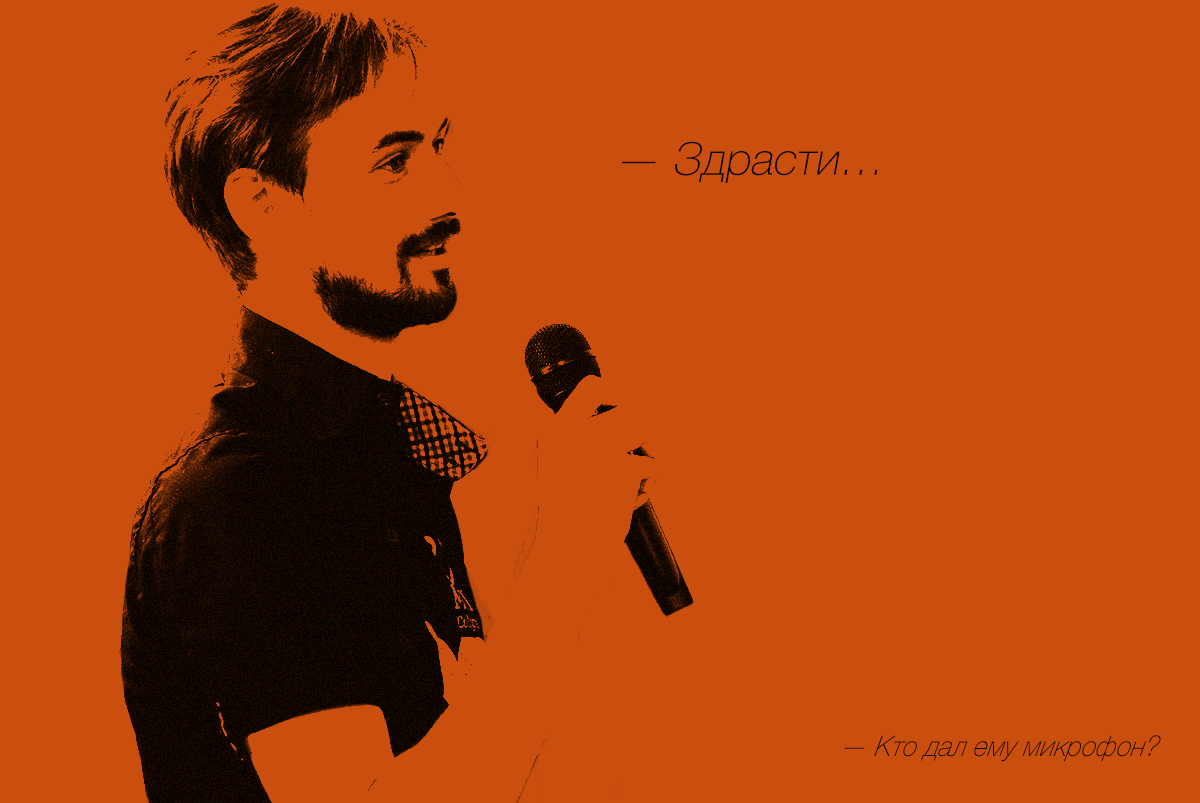
<style>
.page{position:relative;width:1200px;height:803px;background:#ca4e0e}
.page>*{position:absolute;margin:0}
.t1{font:45.2px "HelveticaNeue-Thin";color:#000000;font-style:italic}
.t2{font:28.1px "HelveticaNeue-ThinItalic";color:#000000;font-style:italic;scale:0.95 1}
</style>
<div class="page">
<p class="t1" style="left:622px;top:141px;width:256px;height:42px">— Здрасти…</p>
<p class="t2" style="left:844px;top:735px;width:317px;height:27px">— Кто дал ему микрофон?</p>
</div>
